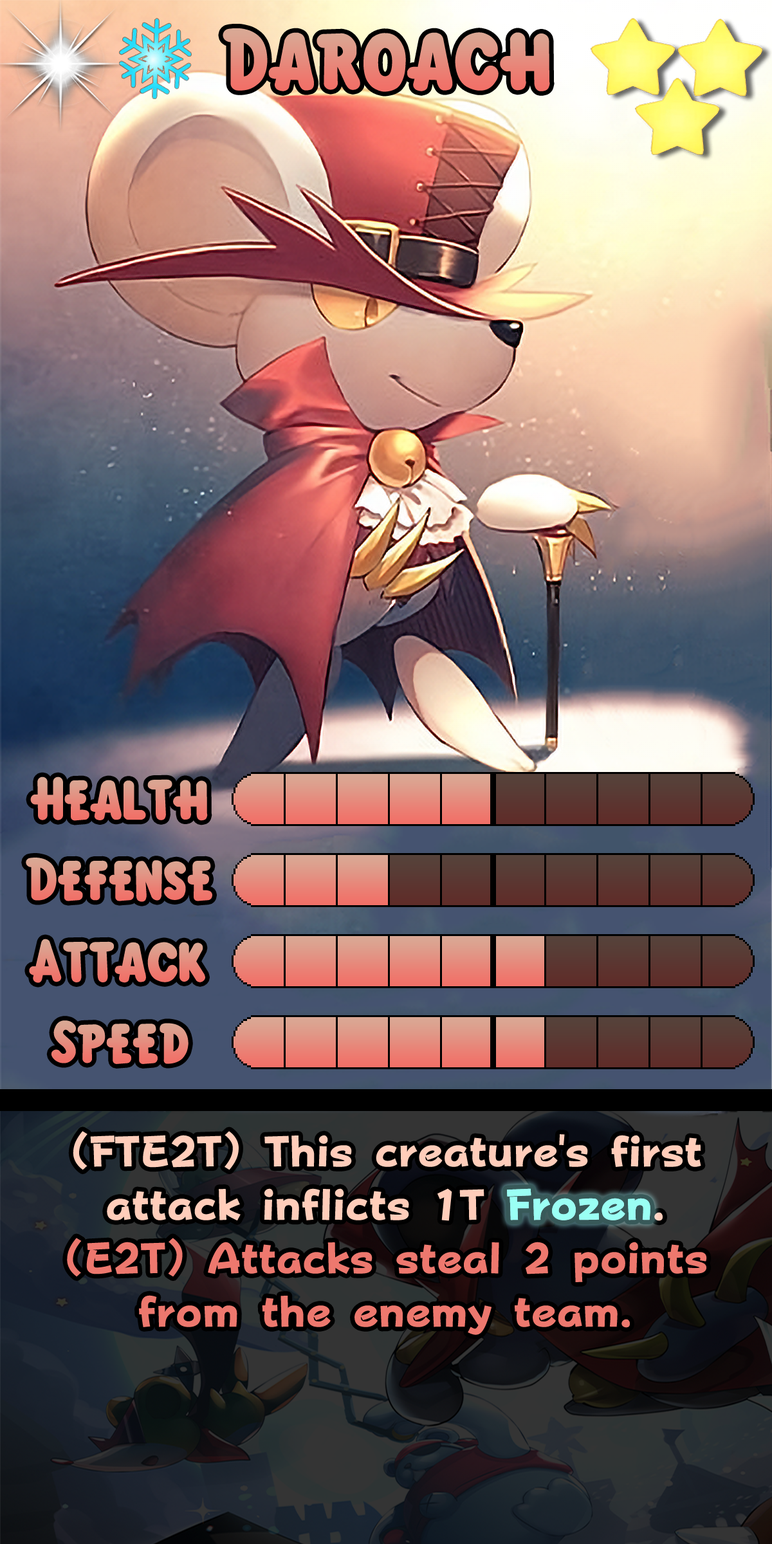
<style>
.page{position:relative;width:772px;height:1544px}
.page>*{position:absolute;margin:0}
.t1{font:135.1px "KirbyClassic";color:#e7897b}
.t2{font:92.7px "KirbyClassic"}
.t3{font:74px/53.4px "FOTPopHappinessStrp-ExtraBold";color:#ed786e}
.t4{font:74px/53.4px "FOTPopHappinessStrp-ExtraBold";color:#ffcdba}
.t5{font:74px/53.4px "FOTPopHappinessStrp-ExtraBold";color:#9afff4}
.t6{font:74px "FOTPopHappinessStrp-ExtraBold";color:#9afff4}
</style>
<div class="page">
<p class="t1" style="left:223px;top:28px;width:327px;height:64px">Daroach</p>
<p class="t2" style="left:30px;top:777px;width:178px;height:44px">Health</p>
<p class="t2" style="left:26px;top:858px;width:186px;height:44px">Defense</p>
<p class="t2" style="left:29px;top:939px;width:176px;height:44px">Attack</p>
<p class="t2" style="left:51px;top:1021px;width:138px;height:43px">Speed</p>
<p class="t3" style="left:67px;top:1131px;width:640px;height:204px;text-align:center"><span class="t4">(FTE2T) This creature's first attack inflicts 1T </span><span class="t5">Frozen</span><span class="t4">.<br></span>(E2T) Attacks steal 2 points from the enemy team.</p>
<p class="t6" style="left:507px;top:1188px;width:144px;height:33px">Frozen</p>
</div>
